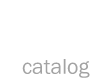
<style>
.page{position:relative;width:90px;height:78px;background:#ffffff}
.page>*{position:absolute;margin:0}
.t1{font:21.9px "FranklinGothic-Book";color:#a3a3a3}
</style>
<div class="page">
<p class="t1" style="left:22px;top:59px;width:68px;height:19px">catalog</p>
</div>
